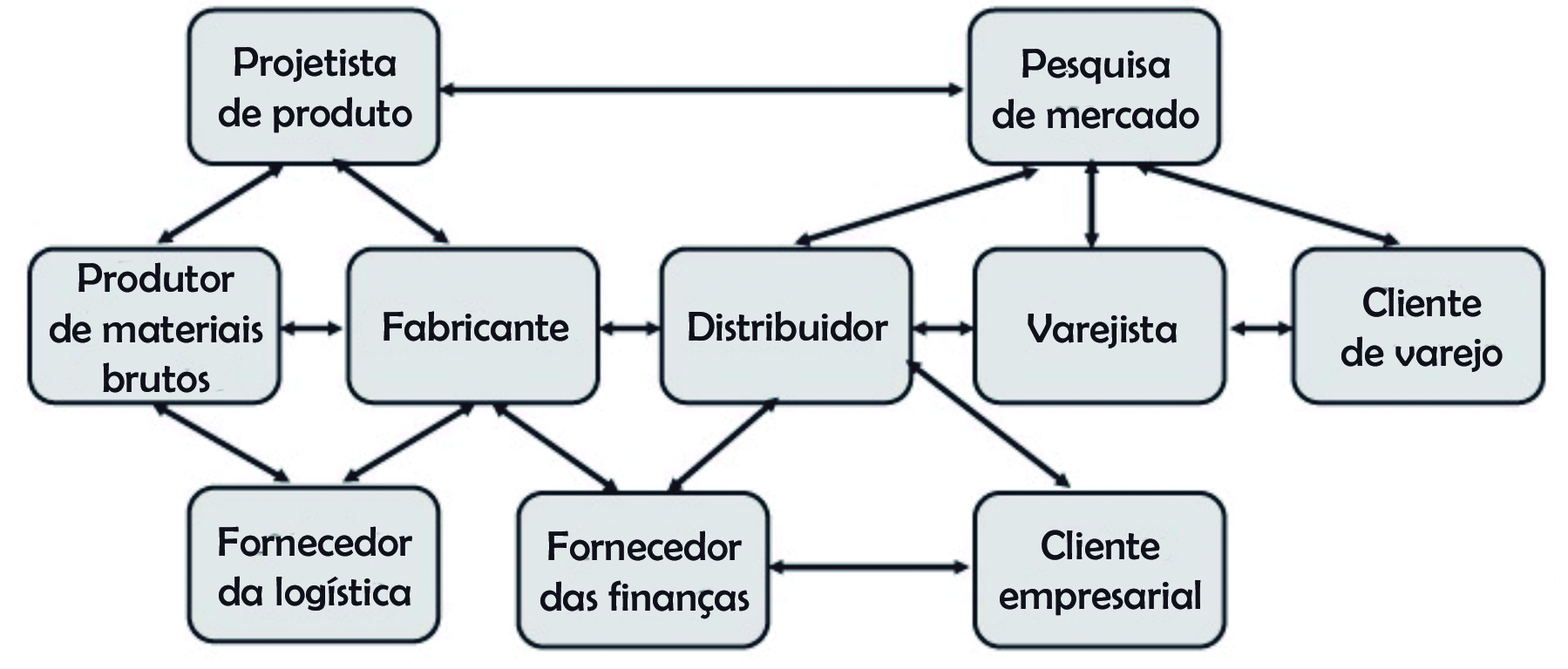
<style>
.page{position:relative;width:1568px;height:669px;background:#ffffff}
.page>*{position:absolute;margin:0}
.t1{font:41.8px "BerlinSansFB-Reg";color:#0f1019}
</style>
<div class="page">
<p class="t1" style="left:219px;top:47px;width:193px;height:86px;text-align:center">Projetista<br>de produto</p>
<p class="t1" style="left:993px;top:49px;width:206px;height:80px;text-align:center">Pesquisa<br>de mercado</p>
<p class="t1" style="left:50px;top:262px;width:213px;height:131px;text-align:center">Produtor<br>de materiais<br>brutos</p>
<p class="t1" style="left:1341px;top:287px;width:162px;height:85px;text-align:center">Cliente<br>de varejo</p>
<p class="t1" style="left:384px;top:311px;width:185px;height:31px">Fabricante</p>
<p class="t1" style="left:689px;top:311px;width:199px;height:31px">Distribuidor</p>
<p class="t1" style="left:1028px;top:314px;width:149px;height:35px">Varejista</p>
<p class="t1" style="left:219px;top:526px;width:193px;height:85px;text-align:center">Fornecedor<br>da logística</p>
<p class="t1" style="left:540px;top:531px;width:210px;height:89px;text-align:center">Fornecedor<br>das finanças</p>
<p class="t1" style="left:1000px;top:530px;width:201px;height:86px;text-align:center">Cliente<br>empresarial</p>
</div>
